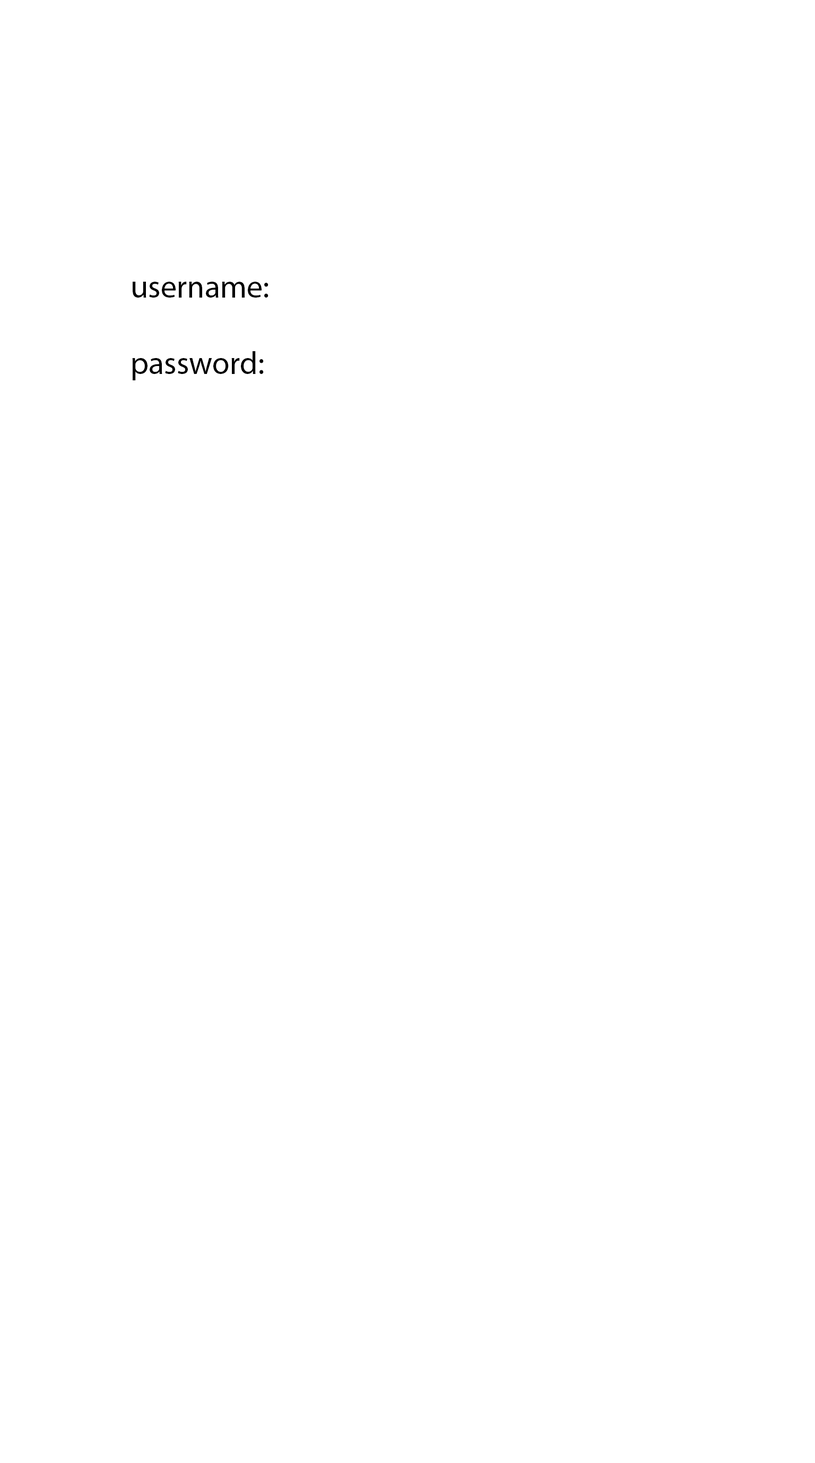
<style>
.page{position:relative;width:815px;height:1463px;background:#ffffff}
.page>*{position:absolute;margin:0}
.t1{font:31.8px "MyriadPro-Regular";color:#000000}
</style>
<div class="page">
<p class="t1" style="left:132px;top:282px;width:136px;height:98px">username:<br><br>password:</p>
</div>
